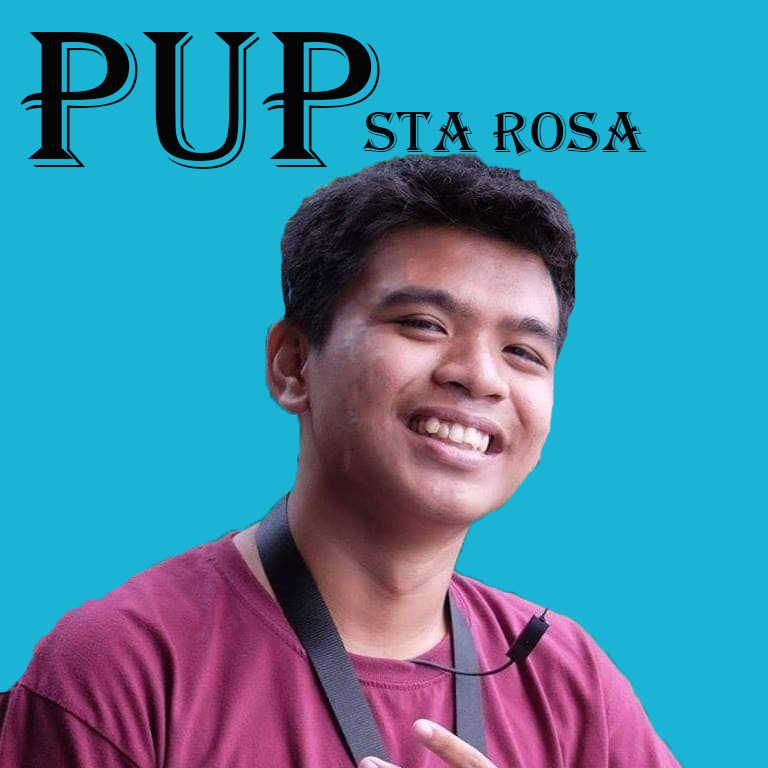
<style>
.page{position:relative;width:768px;height:768px;background:#1bb4d5}
.page>*{position:absolute;margin:0}
.t1{font:202px "Algerian";color:#050505}
.t2{font:60px "Algerian";color:#050505}
</style>
<div class="page">
<p class="t1" style="left:20px;top:32px;width:360px;height:137px">PUP</p>
<p class="t2" style="left:363px;top:112px;width:284px;height:44px">sta rosa</p>
</div>
